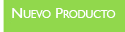
<style>
.page{position:relative;width:125px;height:32px;background:#91d84c}
.page>*{position:absolute;margin:0}
.t1{font:15.3px "GillSansMT";color:#ffffff;font-variant:small-caps}
</style>
<div class="page">
<p class="t1" style="left:12px;top:8px;width:104px;height:10px">Nuevo Producto</p>
</div>
